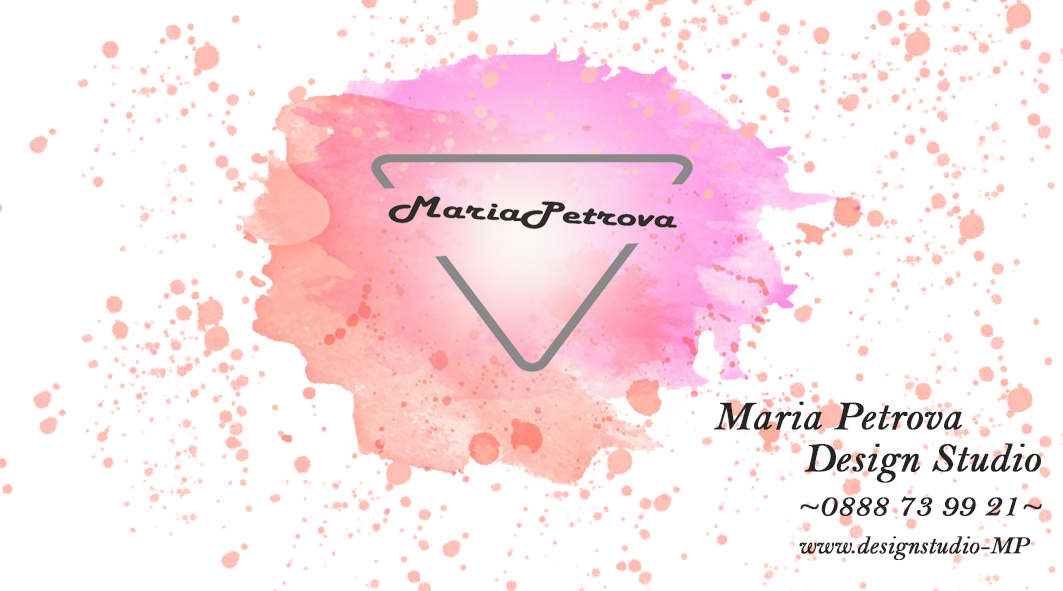
<style>
.page{position:relative;width:1063px;height:591px;background:#ffffff}
.page>*{position:absolute;margin:0}
.t1{font:41.7px/20.8px "BellMTItalic";color:#282323;font-weight:bold}
.t2{font:33.3px "BellMTItalic";color:#282323;font-weight:bold}
.t3{font:25px "BellMTItalic";color:#282323;font-weight:bold}
</style>
<div class="page">
<p class="t1" style="left:713px;top:401px;width:328px;height:82px;text-align:right">Maria Petrova       <br><br>  Design Studio</p>
<p class="t2" style="left:800px;top:496px;width:242px;height:20px">~0888 73 99 21~</p>
<p class="t3" style="left:799px;top:536px;width:232px;height:24px">www.designstudio-MP</p>
</div>
